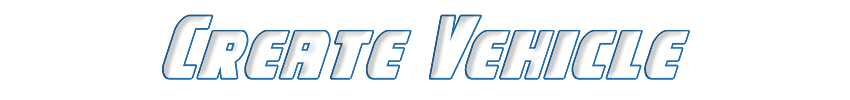
<style>
.page{position:relative;width:850px;height:100px;background:#ffffff}
.page>*{position:absolute;margin:0}
.t1{font:75px "CampJusticeOutlineItalic";color:#206daf}
</style>
<div class="page">
<p class="t1" style="left:162px;top:14px;width:528px;height:66px">Create Vehicle</p>
</div>
